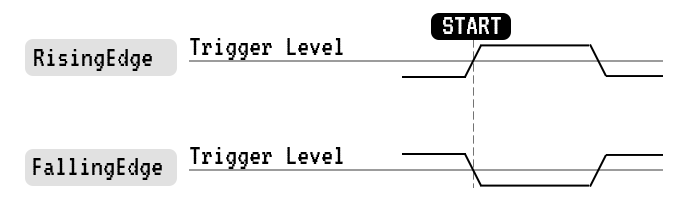
<style>
.page{position:relative;width:700px;height:222px;background:#ffffff}
.page>*{position:absolute;margin:0}
.t1{font:30px "VT323-Regular";color:#ffffff}
.t2{font:30px "VT323-Regular";color:#000000}
</style>
<div class="page">
<p class="t1" style="left:443px;top:17px;width:58px;height:17px">START</p>
<p class="t2" style="left:190px;top:38px;width:153px;height:22px">Trigger Level</p>
<p class="t2" style="left:34px;top:49px;width:118px;height:22px">RisingEdge</p>
<p class="t2" style="left:190px;top:147px;width:153px;height:22px">Trigger Level</p>
<p class="t2" style="left:33px;top:158px;width:129px;height:22px">FallingEdge</p>
</div>
